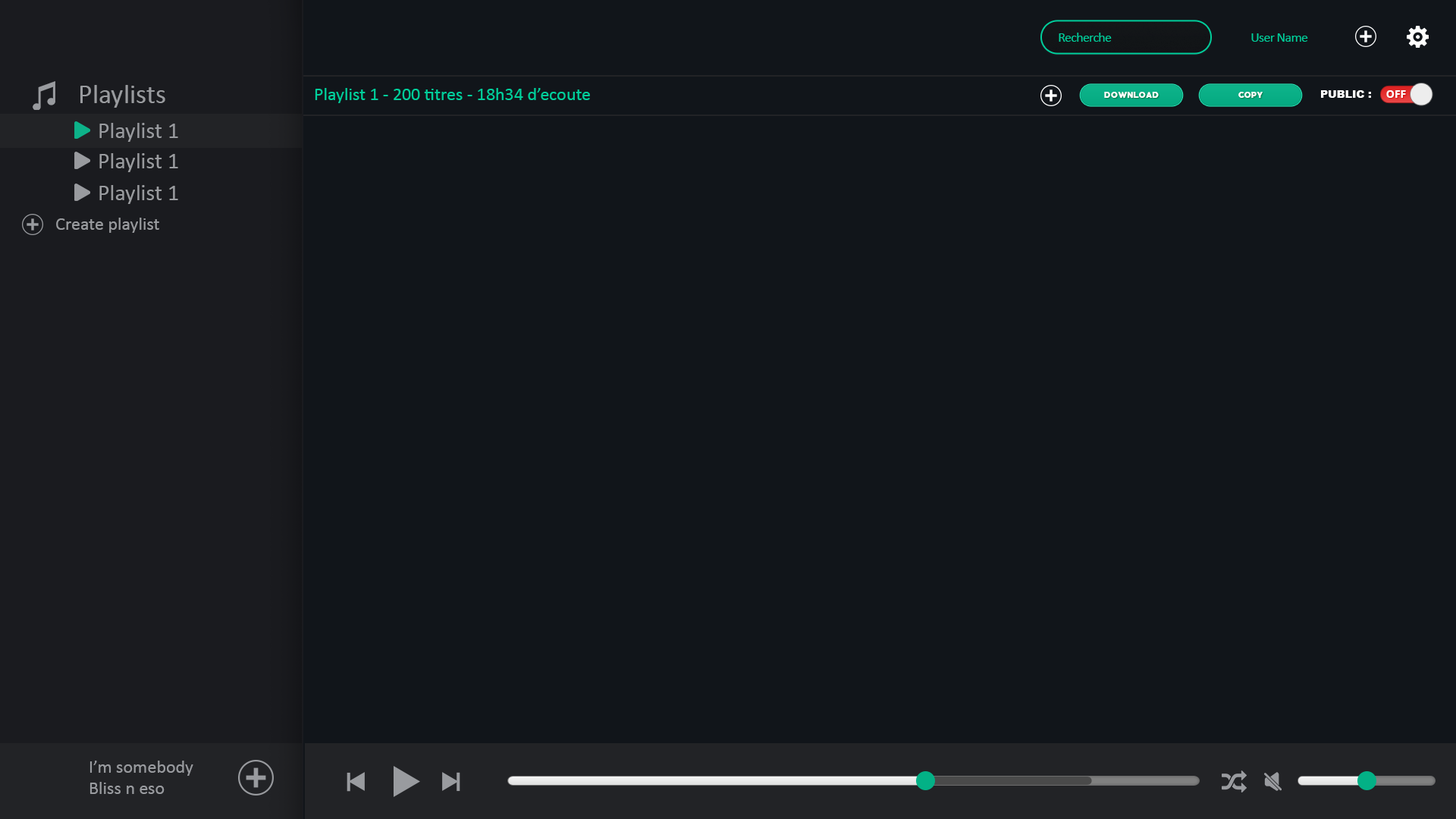
<style>
.page{position:relative;width:1456px;height:819px;background:#11151a}
.page>*{position:absolute;margin:0}
.t1{font:13.6px "Calibri";letter-spacing:-0.04em;color:#00ce9b}
.t2{font:27.3px "Calibri";color:#999b9f}
.t3{font:18.2px "Calibri";color:#00ce9b}
.t4{font:7.5px "PRIMETIME-Regular";letter-spacing:0.025em;color:#ffffff;text-transform:uppercase}
.t5{font:10.6px "Arial-Black";color:#ffffff}
.t6{font:10.6px "OpenSans-Bold";color:#ffffff}
.t7{font:22.7px "Calibri";color:#999b9f}
.t8{font:18.2px "Calibri";color:#999b9f}
</style>
<div class="page">
<p class="t1" style="left:1059px;top:33px;width:53px;height:9px">Recherche</p>
<p class="t1" style="left:1251px;top:33px;width:57px;height:9px">User Name</p>
<p class="t2" style="left:80px;top:85px;width:85px;height:23px">Playlists</p>
<p class="t3" style="left:315px;top:88px;width:275px;height:15px">Playlist 1 - 200 titres - 18h34 d’ecoute</p>
<p class="t4" style="left:1104px;top:92px;width:55px;height:7px">Download</p>
<p class="t4" style="left:1238px;top:92px;width:25px;height:7px">Copy</p>
<p class="t5" style="left:1321px;top:90px;width:50px;height:8px">: PUBLIC</p>
<p class="t6" style="left:1386px;top:90px;width:20px;height:8px">OFF</p>
<p class="t7" style="left:99px;top:123px;width:79px;height:19px">Playlist 1</p>
<p class="t7" style="left:99px;top:153px;width:79px;height:19px">Playlist 1</p>
<p class="t7" style="left:99px;top:185px;width:79px;height:19px">Playlist 1</p>
<p class="t8" style="left:56px;top:218px;width:103px;height:15px">Create playlist</p>
<p class="t8" style="left:89px;top:761px;width:104px;height:33px;text-align:right">I’m somebody<br>Bliss n eso</p>
</div>
